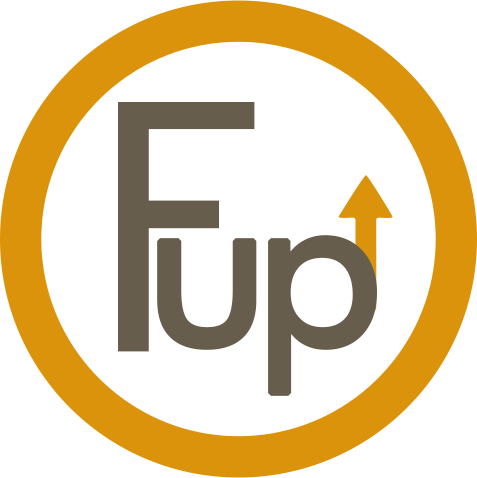
<style>
.page{position:relative;width:477px;height:478px;background:#ffffff}
.page>*{position:absolute;margin:0}
.t1{font:227.6px "FuturaBT-Book";letter-spacing:-0.1em;color:#665d4c;font-weight:bold}
</style>
<div class="page">
<p class="t1" style="left:157px;top:235px;width:220px;height:161px">up</p>
</div>
